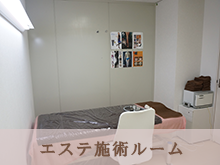
<style>
.page{position:relative;width:220px;height:165px}
.page>*{position:absolute;margin:0}
.t1{font:17px "HGSSoeiPresenceEB";letter-spacing:0.075em;color:#73523f}
</style>
<div class="page">
<p class="t1" style="left:40px;top:141px;width:143px;height:16px">エステ施術ルーム</p>
</div>
